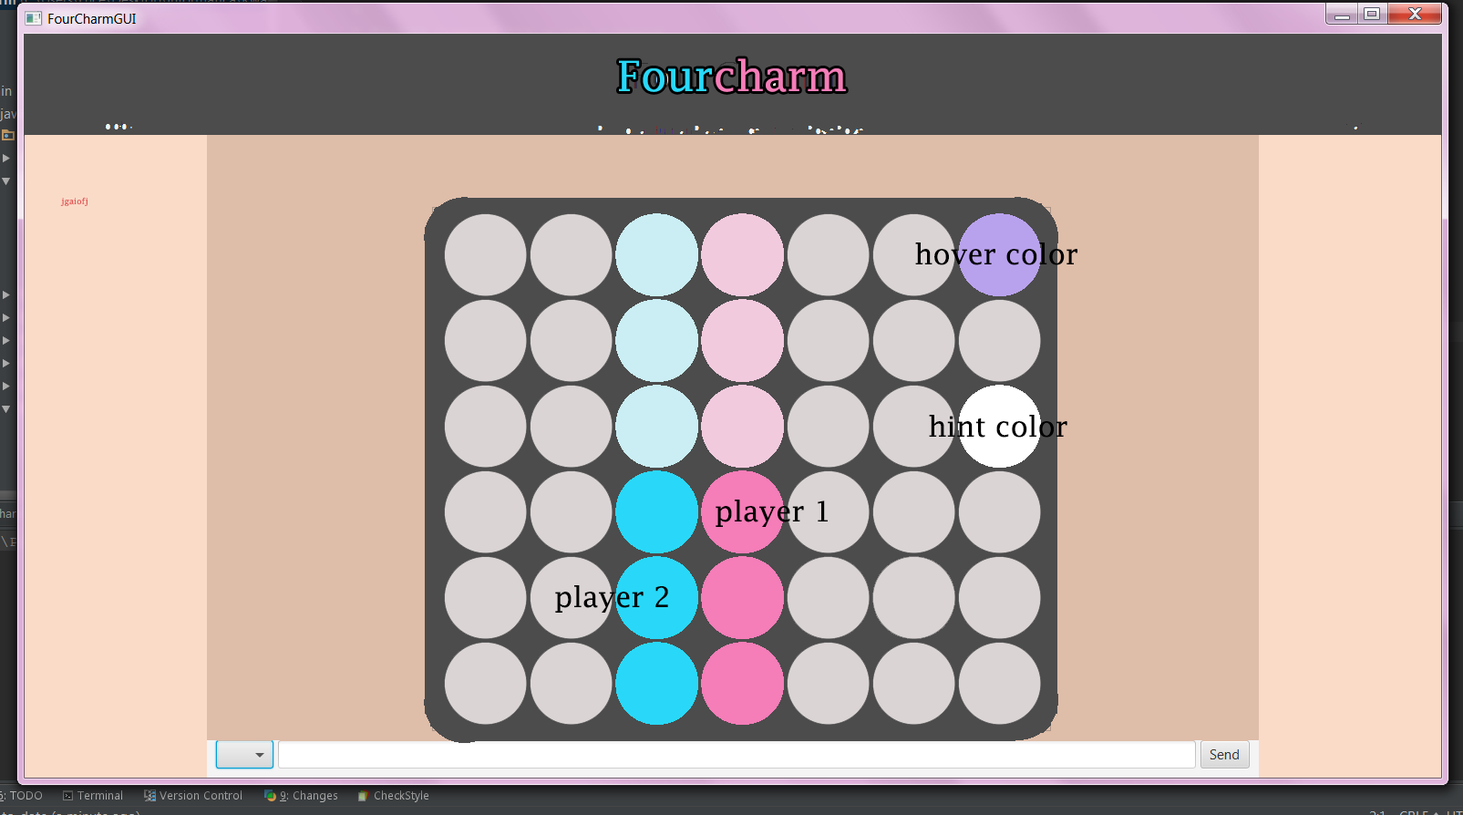
<style>
.page{position:relative;width:1463px;height:815px;background:#debda9}
.page>*{position:absolute;margin:0}
.t1{font:41.9px "LucidaFax";color:#f57db8}
.t2{font:41.9px "LucidaFax";color:#29d8f8}
.t3{font:8.2px "LucidaFax";color:#e25757}
.t4{font:28.3px "LucidaFax";color:#000000}
</style>
<div class="page">
<p class="t1" style="left:619px;top:58px;width:227px;height:34px"><span class="t2">Four</span>charm</p>
<p class="t3" style="left:60px;top:197px;width:28px;height:9px">jgaiofj</p>
<p class="t4" style="left:915px;top:242px;width:163px;height:23px">hover color</p>
<p class="t4" style="left:929px;top:415px;width:138px;height:23px">hint color</p>
<p class="t4" style="left:716px;top:500px;width:112px;height:27px">player 1</p>
<p class="t4" style="left:555px;top:585px;width:113px;height:28px">player 2</p>
</div>
